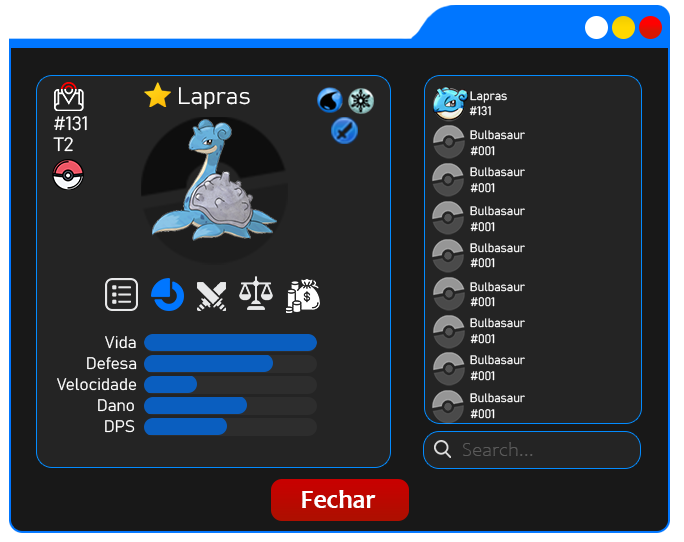
<style>
.page{position:relative;width:684px;height:542px;background:#242424}
.page>*{position:absolute;margin:0}
.t1{font:23.5px "Bahnschrift-Light";color:#ffffff}
.t2{font:12.1px "Bahnschrift-Light";color:#ffffff}
.t3{font:19px "Bahnschrift-Light";color:#ffffff}
.t4{font:19px "Bahnschrift-Light";color:#ffffff;scale:1.03 1}
.t5{font:16.6px "Bahnschrift-Light";color:#ffffff}
.t6{font:20.1px "Candara-Light";color:#5a5a5a}
.t7{font:26px "Candara-Bold";color:#ffffff}
</style>
<div class="page">
<p class="t1" style="left:179px;top:87px;width:71px;height:22px">Lapras</p>
<p class="t2" style="left:470px;top:91px;width:37px;height:12px">Lapras</p>
<p class="t2" style="left:469px;top:106px;width:22px;height:10px">#131</p>
<p class="t3" style="left:54px;top:116px;width:33px;height:15px">#131</p>
<p class="t4" style="left:53px;top:137px;width:20px;height:15px">T2</p>
<p class="t2" style="left:470px;top:130px;width:55px;height:10px">Bulbasaur</p>
<p class="t2" style="left:470px;top:146px;width:25px;height:10px">#001</p>
<p class="t2" style="left:470px;top:167px;width:55px;height:10px">Bulbasaur</p>
<p class="t2" style="left:470px;top:183px;width:25px;height:10px">#001</p>
<p class="t2" style="left:470px;top:206px;width:55px;height:10px">Bulbasaur</p>
<p class="t2" style="left:470px;top:222px;width:25px;height:10px">#001</p>
<p class="t2" style="left:470px;top:243px;width:55px;height:10px">Bulbasaur</p>
<p class="t2" style="left:470px;top:258px;width:25px;height:10px">#001</p>
<p class="t2" style="left:470px;top:282px;width:55px;height:10px">Bulbasaur</p>
<p class="t2" style="left:470px;top:297px;width:25px;height:10px">#001</p>
<p class="t2" style="left:470px;top:318px;width:55px;height:10px">Bulbasaur</p>
<p class="t5" style="left:105px;top:336px;width:31px;height:13px">Vida</p>
<p class="t2" style="left:470px;top:334px;width:25px;height:10px">#001</p>
<p class="t5" style="left:87px;top:357px;width:50px;height:13px">Defesa</p>
<p class="t2" style="left:470px;top:355px;width:55px;height:10px">Bulbasaur</p>
<p class="t2" style="left:470px;top:371px;width:25px;height:10px">#001</p>
<p class="t5" style="left:57px;top:378px;width:80px;height:13px">Velocidade</p>
<p class="t5" style="left:98px;top:399px;width:36px;height:13px">Dano</p>
<p class="t2" style="left:470px;top:393px;width:55px;height:10px">Bulbasaur</p>
<p class="t2" style="left:470px;top:409px;width:25px;height:10px">#001</p>
<p class="t5" style="left:105px;top:419px;width:30px;height:14px">DPS</p>
<p class="t6" style="left:463px;top:442px;width:70px;height:14px">Search...</p>
<p class="t7" style="left:302px;top:490px;width:74px;height:18px">Fechar</p>
</div>
